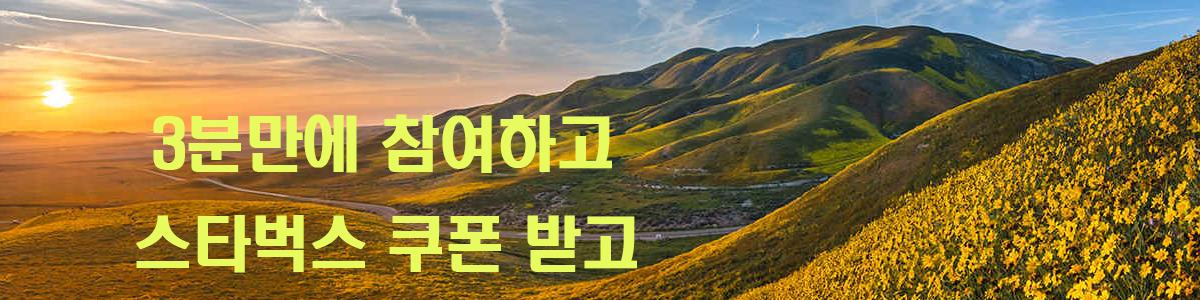
<style>
.page{position:relative;width:1200px;height:300px}
.page>*{position:absolute;margin:0}
.t1{font:60px/100px "H2hdrM";letter-spacing:-0.05em;color:#e7fb5f;font-weight:bold}
</style>
<div class="page">
<p class="t1" style="left:136px;top:114px;width:501px;height:159px">3분만에 참여하고 <br>스타벅스 쿠폰 받고</p>
</div>
